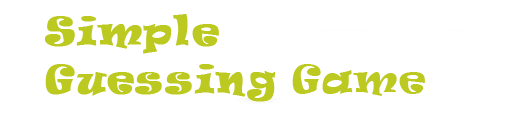
<style>
.page{position:relative;width:512px;height:128px;background:#ffffff}
.page>*{position:absolute;margin:0}
.t1{font:36px/48px "Ravie";letter-spacing:0.05em;color:#bbc920;font-weight:bold}
.t2{font:36px/48px "Ravie";letter-spacing:0.05em;color:#bbc920}
</style>
<div class="page">
<p class="t1" style="left:45px;top:14px;width:380px;height:88px">Simple Guessing<span class="t2"> Game</span></p>
</div>
